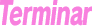
<style>
.page{position:relative;width:92px;height:26px;background:#ffffff}
.page>*{position:absolute;margin:0}
.t1{font:32px "RodinPro-EB";letter-spacing:-0.052em;color:#f880de;font-style:italic;scale:0.69 1}
</style>
<div class="page">
<p class="t1" style="left:0px;top:0px;width:93px;height:26px">Terminar</p>
</div>
